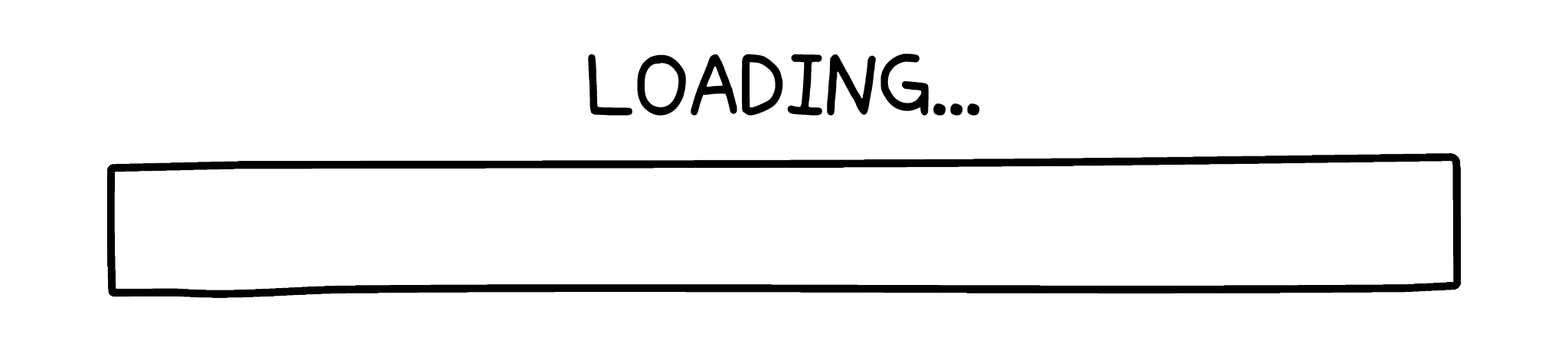
<style>
.page{position:relative;width:1568px;height:344px;background:#ffffff}
.page>*{position:absolute;margin:0}
.t1{font:102.1px "Ownglyph_konghae-Rg";color:#000000}
</style>
<div class="page">
<p class="t1" style="left:588px;top:54px;width:392px;height:62px">LOADING...</p>
</div>
